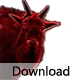
<style>
.page{position:relative;width:80px;height:80px;background:#ffffff}
.page>*{position:absolute;margin:0}
.t1{font:13px "SegoeUISymbol";color:#000000}
</style>
<div class="page">
<p class="t1" style="left:13px;top:66px;width:57px;height:10px">Download</p>
</div>
